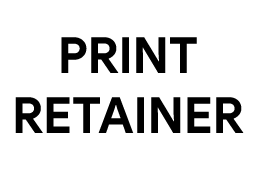
<style>
.page{position:relative;width:260px;height:169px;background:#ffffff}
.page>*{position:absolute;margin:0}
.t1{font:50px "ProductSans-Bold";color:#000000}
</style>
<div class="page">
<p class="t1" style="left:15px;top:37px;width:229px;height:96px;text-align:center">PRINT<br>RETAINER</p>
</div>
